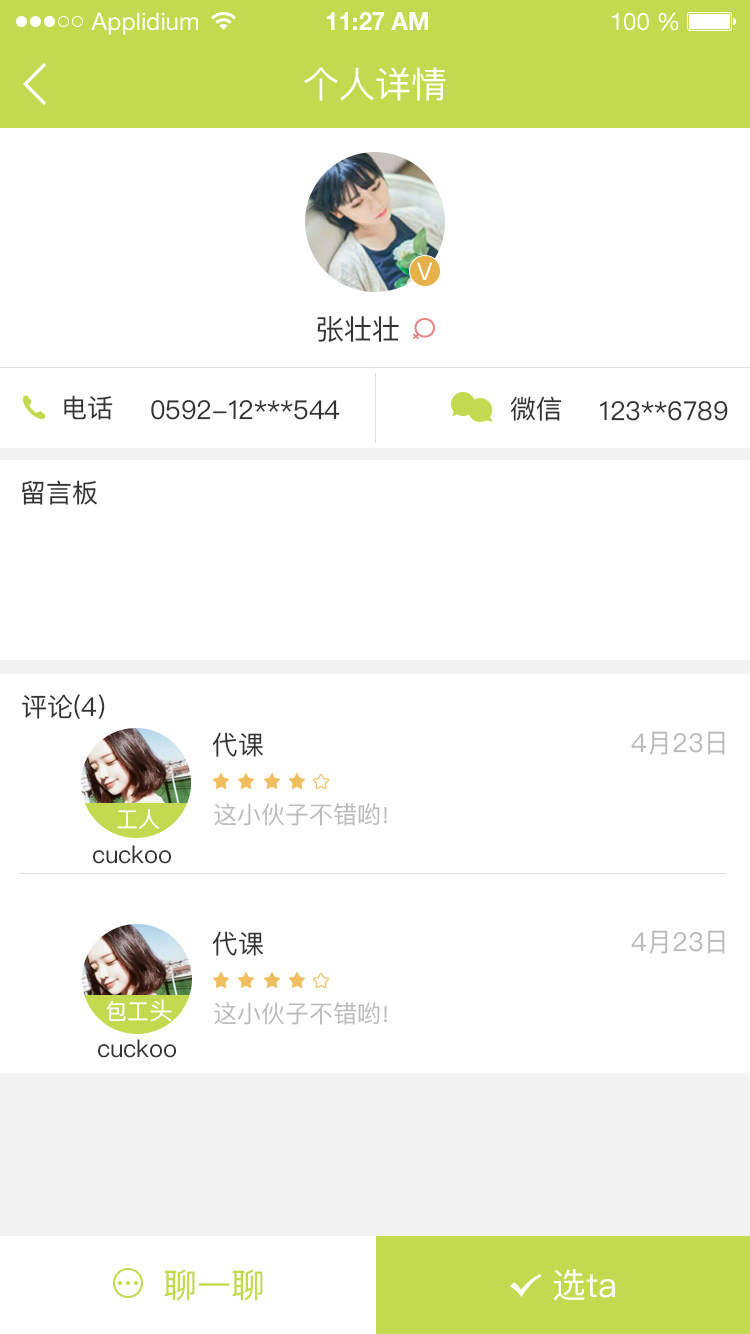
<style>
.page{position:relative;width:750px;height:1334px;background:#ffffff}
.page>*{position:absolute;margin:0}
.t1{font:24px "HelveticaNeueLTStd-Roman";color:#ffffff}
.t2{font:24px "HelveticaNeueLTStd-Bd";color:#ffffff}
.t3{font:36px "PingFangSC-Regular";color:#ffffff}
.t4{font:24px "PingFangSC-Regular";color:#ffffff}
.t5{font:28px "PingFangSC-Regular";color:#333333}
.t6{font:26px "PingFangSC-Regular";color:#333333}
.t7{font:26px "PingFangSC-Regular";color:#bbbbbb}
.t8{font:22px "PingFangSC-Regular";color:#ffffff}
.t9{font:24px "PingFangSC-Regular";color:#bbbbbb}
.t10{font:22px "PingFangSC-Regular";color:#bbbbbb}
.t11{font:24px "PingFangSC-Regular";color:#333333}
.t12{font:34px "PingFangSC-Regular";color:#c3d94f}
.t13{font:34px "PingFangSC-Regular";color:#ffffff}
</style>
<div class="page">
<p class="t1" style="left:91px;top:12px;width:107px;height:23px">Applidium</p>
<p class="t2" style="left:326px;top:12px;width:102px;height:18px">11:27 AM</p>
<p class="t1" style="left:612px;top:12px;width:67px;height:19px">100 %</p>
<p class="t3" style="left:304px;top:67px;width:142px;height:34px">个人详情</p>
<p class="t4" style="left:417px;top:262px;width:16px;height:18px">V</p>
<p class="t5" style="left:317px;top:316px;width:82px;height:26px">张壮壮</p>
<p class="t6" style="left:64px;top:395px;width:49px;height:25px">电话</p>
<p class="t6" style="left:151px;top:400px;width:189px;height:20px">0592-12***544</p>
<p class="t6" style="left:510px;top:396px;width:52px;height:25px">微信</p>
<p class="t6" style="left:600px;top:401px;width:128px;height:20px">123**6789</p>
<p class="t6" style="left:21px;top:480px;width:76px;height:25px">留言板</p>
<p class="t6" style="left:22px;top:694px;width:83px;height:25px">评论(4)</p>
<p class="t6" style="left:212px;top:732px;width:51px;height:25px">代课</p>
<p class="t7" style="left:631px;top:731px;width:94px;height:24px">4月23日</p>
<p class="t8" style="left:117px;top:809px;width:43px;height:21px">工人</p>
<p class="t9" style="left:214px;top:803px;width:173px;height:23px">这小伙子不错哟<span class="t10">！</span></p>
<p class="t11" style="left:93px;top:845px;width:78px;height:19px">cuckoo</p>
<p class="t6" style="left:212px;top:931px;width:51px;height:25px">代课</p>
<p class="t7" style="left:631px;top:930px;width:94px;height:24px">4月23日</p>
<p class="t8" style="left:106px;top:999px;width:66px;height:23px">包工<span class="t4">头</span></p>
<p class="t9" style="left:214px;top:1002px;width:173px;height:23px">这小伙子不错哟<span class="t10">！</span></p>
<p class="t11" style="left:98px;top:1039px;width:78px;height:19px">cuckoo</p>
<p class="t12" style="left:164px;top:1269px;width:99px;height:32px">聊一聊</p>
<p class="t13" style="left:553px;top:1269px;width:62px;height:32px">选ta</p>
</div>
